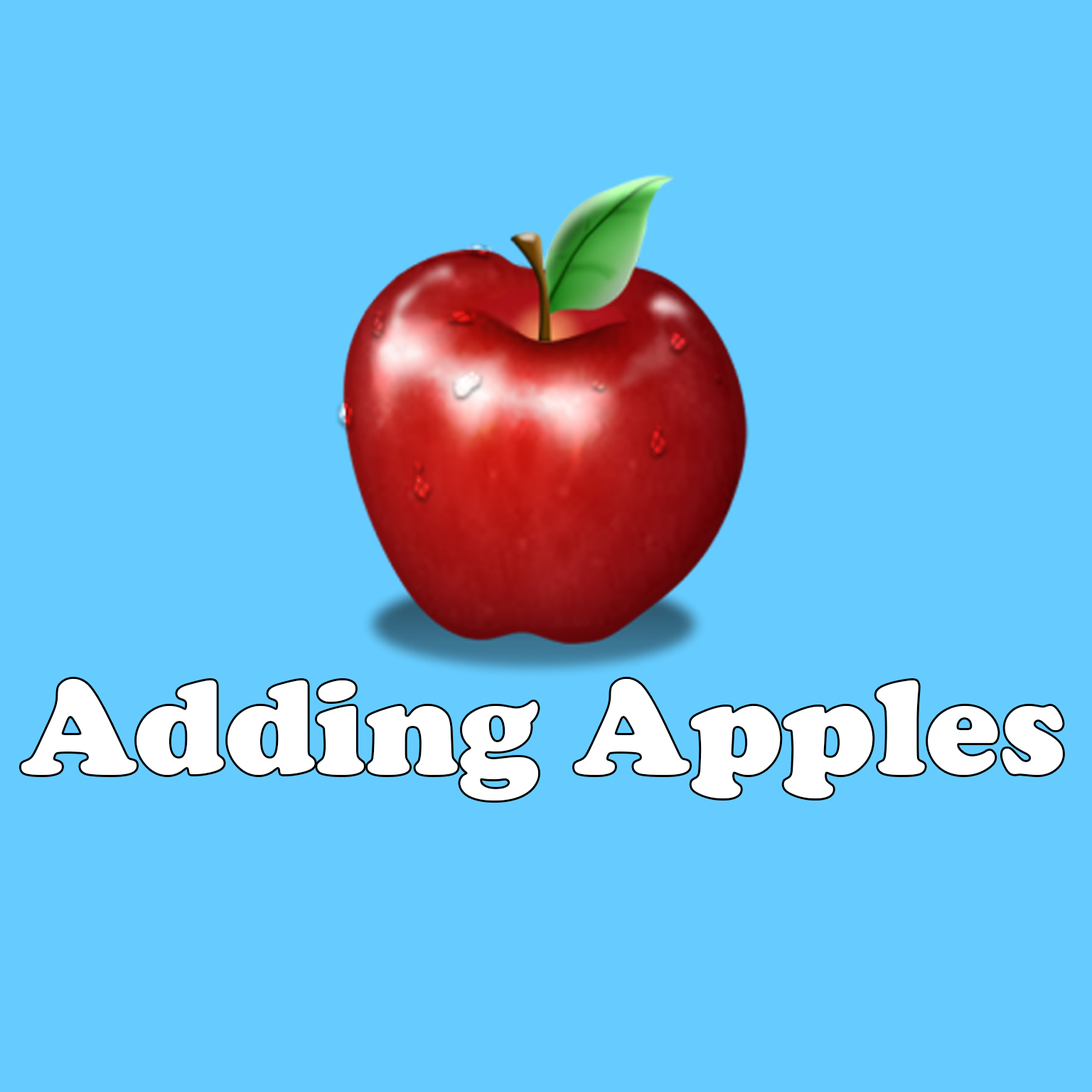
<style>
.page{position:relative;width:1092px;height:1092px;background:#66ccff}
.page>*{position:absolute;margin:0}
.t1{font:139.3px "CooperBlack";color:#ffffff}
</style>
<div class="page">
<p class="t1" style="left:21px;top:679px;width:1042px;height:122px">Adding Apples</p>
</div>
